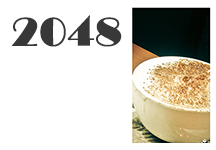
<style>
.page{position:relative;width:216px;height:150px;background:#ffffff}
.page>*{position:absolute;margin:0}
.t1{font:41.7px "Broadway";color:#383838;font-weight:bold}
</style>
<div class="page">
<p class="t1" style="left:11px;top:15px;width:111px;height:32px">2048</p>
</div>
